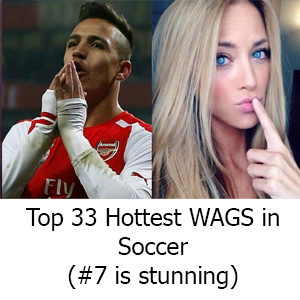
<style>
.page{position:relative;width:300px;height:300px;background:#ffffff}
.page>*{position:absolute;margin:0}
.t1{font:24px "Tahoma";color:#000000}
</style>
<div class="page">
<p class="t1" style="left:26px;top:208px;width:253px;height:81px;text-align:center">Top 33 Hottest WAGS in<br>Soccer<br>(#7 is stunning)</p>
</div>
